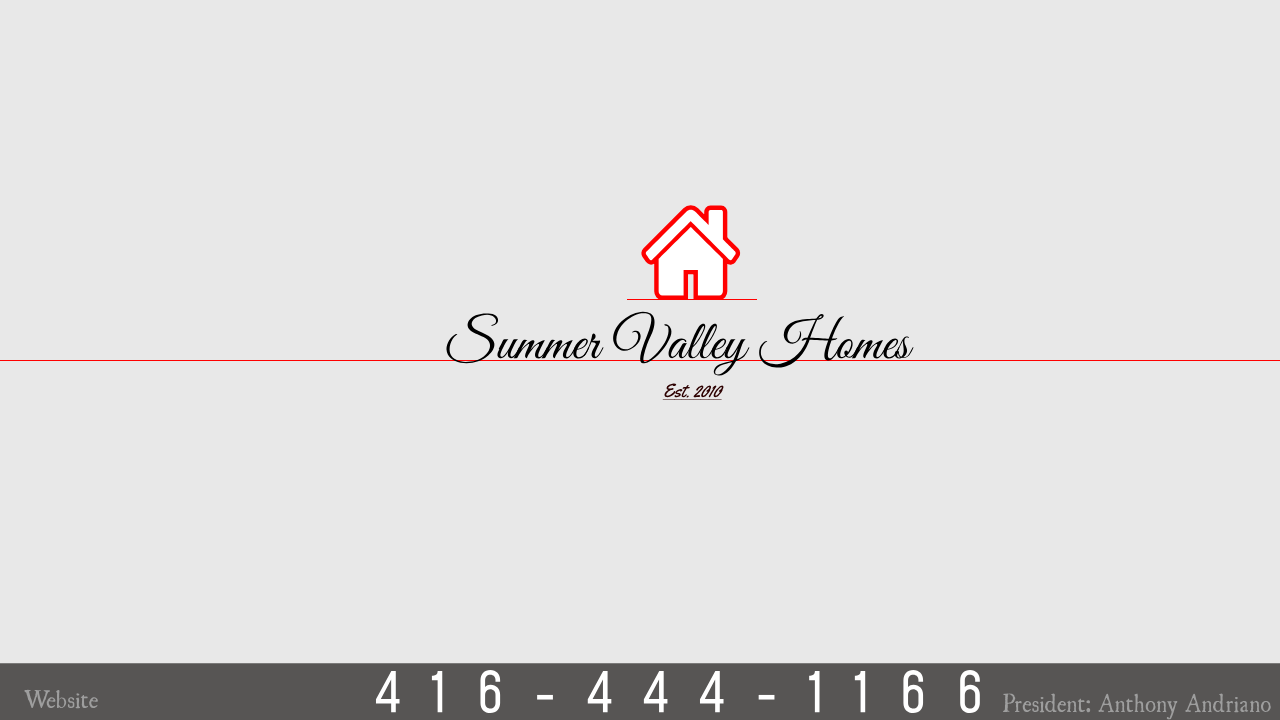
<style>
.page{position:relative;width:1280px;height:720px;background:#e8e8e8}
.page>*{position:absolute;margin:0}
.t1{font:55px "GreatVibes-Regular";color:#000000}
.t2{font:19px "Yellowtail-Regular";letter-spacing:-0.001em;color:#2d0101;text-decoration:underline}
.t3{font:55px "Mohave-Regular";letter-spacing:0.542em;color:#ffffff}
.t4{font:22.5px "UglyQua";color:#9e9e9e}
.t5{font:23px "UglyQua";color:#9e9e9e;scale:0.95 1}
</style>
<div class="page">
<p class="t1" style="left:446px;top:308px;width:468px;height:68px">Summer Valley Homes</p>
<p class="t2" style="left:662px;top:383px;width:62px;height:17px">Est. 2010</p>
<p class="t3" style="left:375px;top:670px;width:605px;height:44px">416-444-1166</p>
<p class="t4" style="left:24px;top:689px;width:74px;height:20px">Website</p>
<p class="t5" style="left:1002px;top:693px;width:269px;height:27px">President: Anthony Andriano</p>
</div>
